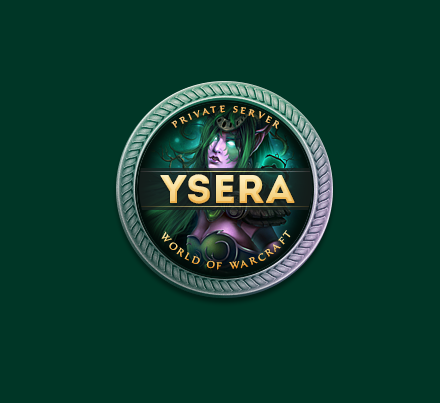
<style>
.page{position:relative;width:440px;height:403px;background:#003626}
.page>*{position:absolute;margin:0}
.t1{font:9px "SavaPro-Regular";letter-spacing:0.3em;text-transform:uppercase}
.t2{font:40px "Intro";text-transform:uppercase}
.t3{font:10px "SavaPro-Regular";letter-spacing:0.3em;text-transform:uppercase}
</style>
<div class="page">
<p class="t1" style="left:171px;top:105px;width:108px;height:24px;text-align:center">private server</p>
<p class="t2" style="left:160px;top:174px;width:135px;height:30px">ysera</p>
<p class="t3" style="left:161px;top:230px;width:130px;height:40px;text-align:center">world of warcraft</p>
</div>
